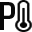
<style>
.page{position:relative;width:32px;height:32px;background:#ffffff}
.page>*{position:absolute;margin:0}
.t1{font:41.3px "Knockout-HTF29-JuniorLiteweight";color:#000000}
</style>
<div class="page">
<p class="t1" style="left:0px;top:2px;width:15px;height:28px;opacity:0.97">P</p>
</div>
